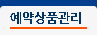
<style>
.page{position:relative;width:97px;height:35px;background:#f6f6f6}
.page>*{position:absolute;margin:0}
.t1{font:13px "NanumGothicExtraBold";color:#003366}
</style>
<div class="page">
<p class="t1" style="left:10px;top:12px;width:71px;height:12px">예약상품관리</p>
</div>
